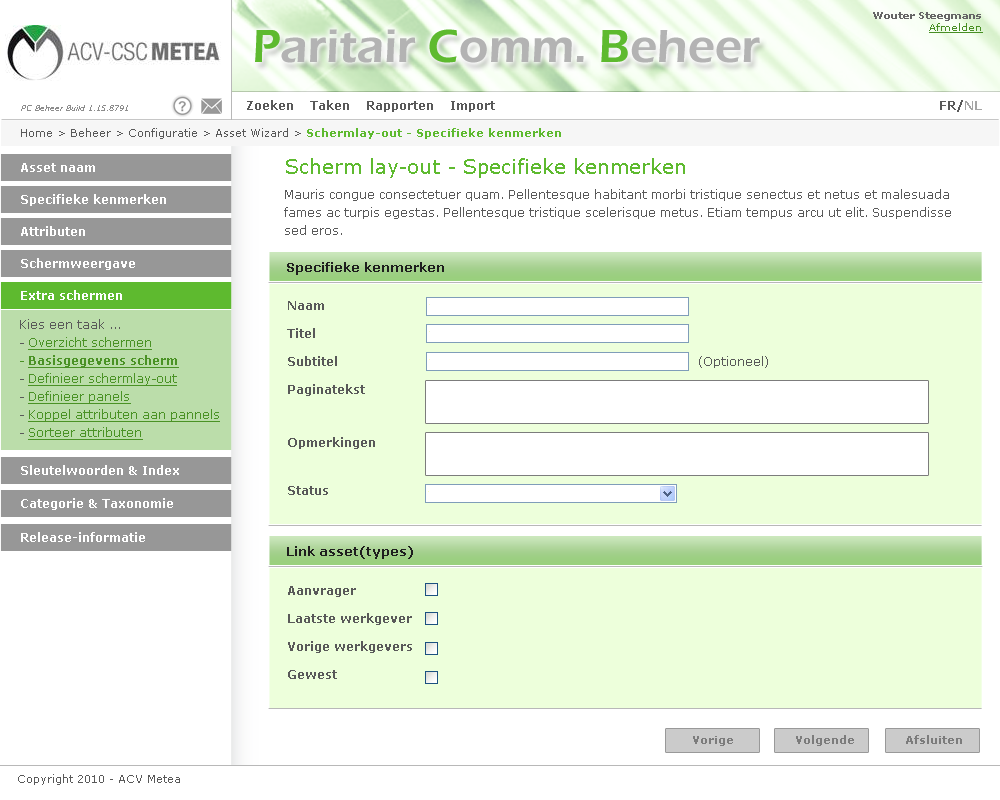
<style>
.page{position:relative;width:1000px;height:800px;background:#ffffff}
.page>*{position:absolute;margin:0}
.t1{font:10px "Verdana-Bold";color:#666666}
.t2{font:10px "Verdana";color:#488f24;text-decoration:underline}
.t3{font:48px "ErasITC-Demi";color:#b3b3b3}
.t4{font:48px "ErasITC-Demi";color:#5eba2f}
.t5{font:12px "Verdana-Bold";color:#595959}
.t6{font:12px "Verdana-Bold";color:#a4a4a4}
.t7{font:8px "Verdana-Italic";color:#8c8c8c}
.t8{font:11px "Verdana";color:#595959}
.t9{font:11px "Verdana-Bold";color:#5eba2f}
.t10{font:20px "Verdana";color:#5eba2f}
.t11{font:12px "Verdana-Bold";color:#ffffff}
.t12{font:12px/18px "Verdana";color:#595959}
.t13{font:13px "Verdana-Bold";color:#1e1e1e}
.t14{font:12px/18px "Verdana-Bold";color:#595959}
.t15{font:12px/18px "Verdana";color:#4a9225;text-decoration:underline}
.t16{font:12px/18px "Verdana";color:#4a9225}
.t17{font:12px/18px "Verdana-Bold";color:#4a9225;text-decoration:underline}
.t18{font:12px "Verdana";color:#595959}
.t19{font:11px "Verdana-Bold";color:#7c7c7c}
</style>
<div class="page">
<p class="t1" style="left:873px;top:12px;width:110px;height:21px;text-align:right">Wouter Steegmans<br><span class="t2">Afmelden</span></p>
<p class="t3" style="left:255px;top:29px;width:505px;height:34px"><span class="t4">P</span>aritair <span class="t4">C</span>omm. <span class="t4">B</span>eheer</p>
<p class="t5" style="left:247px;top:100px;width:248px;height:12px">Zoeken    Taken    Rapporten    Import</p>
<p class="t5" style="left:940px;top:100px;width:42px;height:12px">FR/<span class="t6">NL</span></p>
<p class="t7" style="left:21px;top:105px;width:107px;height:6px">PC Beheer Build 1.15.8791</p>
<p class="t8" style="left:21px;top:128px;width:540px;height:11px">Home &gt; Beheer &gt; Configuratie &gt; Asset Wizard &gt; <span class="t9">Schermlay-out - Specifieke kenmerken</span></p>
<p class="t10" style="left:286px;top:158px;width:399px;height:20px">Scherm lay-out - Specifieke kenmerken</p>
<p class="t11" style="left:21px;top:163px;width:74px;height:9px">Asset naam</p>
<p class="t11" style="left:21px;top:194px;width:145px;height:12px">Specifieke kenmerken</p>
<p class="t12" style="left:284px;top:189px;width:667px;height:46px">Mauris congue consectetuer quam. Pellentesque habitant morbi tristique senectus et netus et malesuada <br>fames ac turpis egestas. Pellentesque tristique scelerisque metus. Etiam tempus arcu ut elit. Suspendisse <br>sed eros.</p>
<p class="t11" style="left:21px;top:226px;width:64px;height:10px">Attributen</p>
<p class="t11" style="left:21px;top:258px;width:114px;height:12px">Schermweergave</p>
<p class="t13" style="left:287px;top:262px;width:157px;height:13px">Specifieke kenmerken</p>
<p class="t11" style="left:21px;top:290px;width:101px;height:10px">Extra schermen</p>
<p class="t14" style="left:287px;top:301px;width:88px;height:194px">Naam<br> <br>Titel<br> <br>Subtitel<br> <br>Paginatekst<br> <br><br><br>Opmerkingen<br> <br><br><br>Status</p>
<p class="t15" style="left:20px;top:319px;width:200px;height:121px"><span class="t12">Kies een taak ...<br>- </span>Overzicht schermen<br><span class="t16">- </span><span class="t17">Basisgegevens scherm<br></span><span class="t12">- </span>Definieer schermlay-out<br><span class="t12">- </span>Definieer panels<br><span class="t12">- </span>Koppel attributen aan pannels<br><span class="t12">- </span>Sorteer attributen</p>
<p class="t18" style="left:699px;top:356px;width:69px;height:12px">(Optioneel)</p>
<p class="t11" style="left:21px;top:465px;width:158px;height:10px">Sleutelwoorden &amp; Index</p>
<p class="t11" style="left:21px;top:498px;width:152px;height:12px">Categorie &amp; Taxonomie</p>
<p class="t11" style="left:21px;top:532px;width:124px;height:10px">Release-informatie</p>
<p class="t13" style="left:287px;top:546px;width:126px;height:13px">Link asset(types)</p>
<p class="t14" style="left:288px;top:586px;width:124px;height:93px">Aanvrager<br> <br>Laatste werkgever<br> <br>Vorige werkgevers<br> <br>Gewest</p>
<p class="t19" style="left:693px;top:736px;width:40px;height:10px">Vorige</p>
<p class="t19" style="left:796px;top:735px;width:58px;height:11px">Volgende</p>
<p class="t19" style="left:906px;top:735px;width:56px;height:9px">Afsluiten</p>
<p class="t8" style="left:18px;top:774px;width:162px;height:11px">Copyright 2010 - ACV Metea</p>
</div>
